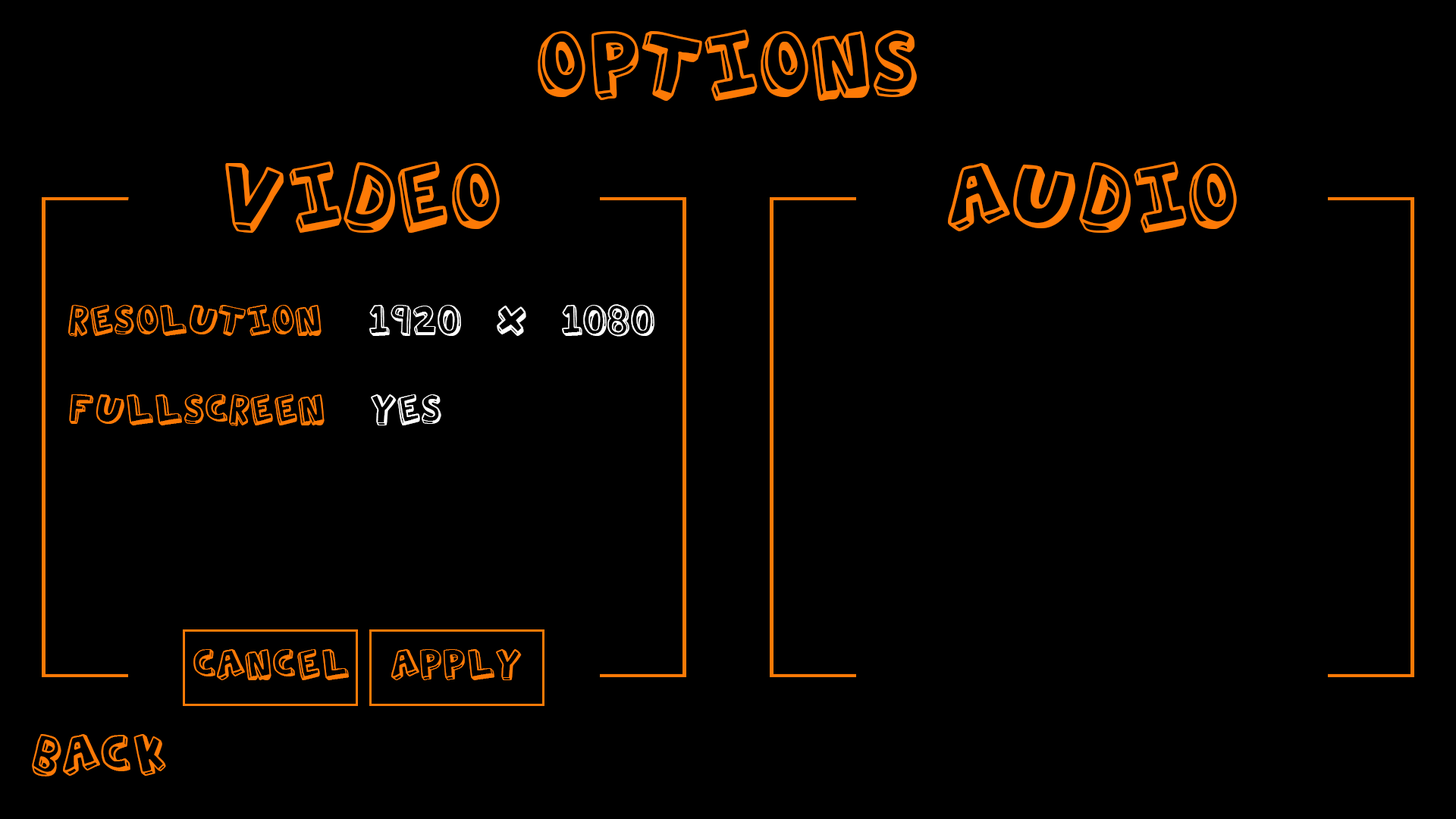
<style>
.page{position:relative;width:1456px;height:819px;background:#000000}
.page>*{position:absolute;margin:0}
.t1{font:91px "ActionJackson";color:#fd7a06}
.t2{font:41px "ActionJackson";color:#fd7a06}
.t3{font:41px "ActionJackson";color:#ffffff}
.t4{font:54.6px "ActionJackson";color:#fd7a06}
</style>
<div class="page">
<p class="t1" style="left:538px;top:30px;width:379px;height:71px">Options</p>
<p class="t1" style="left:225px;top:162px;width:275px;height:71px">Video</p>
<p class="t1" style="left:948px;top:162px;width:289px;height:71px">Audio</p>
<p class="t2" style="left:68px;top:305px;width:254px;height:32px">Resolution</p>
<p class="t3" style="left:369px;top:304px;width:285px;height:33px">1920 x 1080</p>
<p class="t2" style="left:69px;top:394px;width:256px;height:32px">Fullscreen</p>
<p class="t3" style="left:371px;top:394px;width:70px;height:31px">yes</p>
<p class="t2" style="left:193px;top:649px;width:156px;height:31px">Cancel</p>
<p class="t2" style="left:391px;top:649px;width:131px;height:31px">Apply</p>
<p class="t4" style="left:32px;top:734px;width:134px;height:43px">Back</p>
</div>
